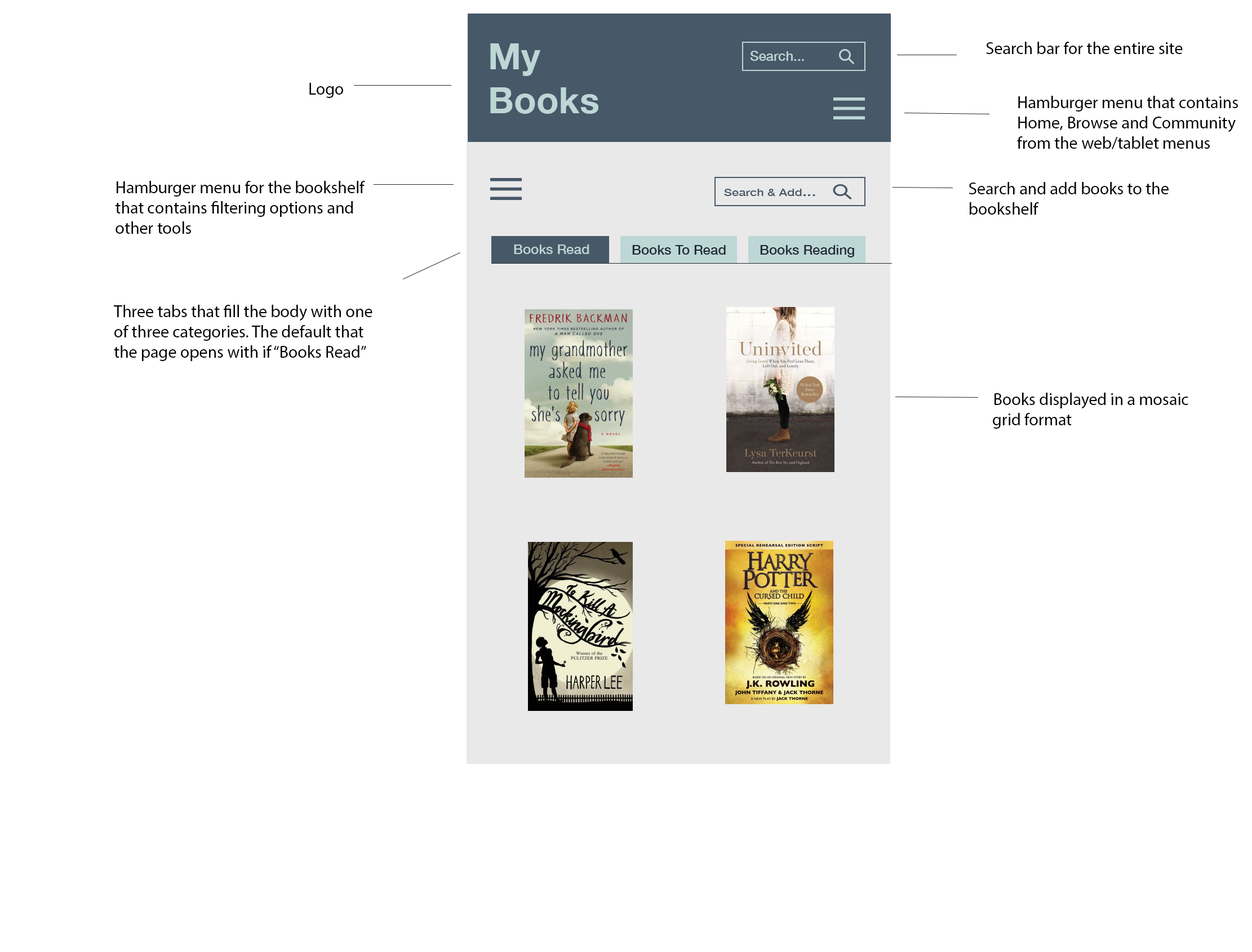
<style>
.page{position:relative;width:1252px;height:952px;background:#ffffff}
.page>*{position:absolute;margin:0}
.t1{font:16.9px "MyriadPro-Regular";color:#000000}
.t2{font:36.6px "HelveticaNeue-Bold";color:#bcd7d6}
.t3{font:13.5px "HelveticaNeue-Medium";color:#bcd7d6}
.t4{font:10.1px "HelveticaNeue-Medium";color:#475868;scale:1.22 1}
.t5{font:13.5px "HelveticaNeue-Medium";color:#475868;scale:1.22 1}
.t6{font:13.5px "HelveticaNeue-Medium";color:#222a31}
</style>
<div class="page">
<p class="t1" style="left:986px;top:42px;width:197px;height:12px">Search bar for the entire site</p>
<p class="t2" style="left:490px;top:43px;width:108px;height:71px">My <br>Books</p>
<p class="t3" style="left:750px;top:51px;width:54px;height:10px">Search...</p>
<p class="t1" style="left:309px;top:83px;width:34px;height:15px">Logo</p>
<p class="t1" style="left:1017px;top:96px;width:221px;height:53px">Hamburger menu that contains<br>Home, Browse and Community<br>from the web/tablet menus</p>
<p class="t1" style="left:116px;top:181px;width:249px;height:53px">Hamburger menu for the bookshelf<br>that contains filtering options and<br>other tools</p>
<p class="t1" style="left:969px;top:182px;width:200px;height:33px">Search and add books to the <br>bookshelf</p>
<p class="t4" style="left:724px;top:189px;width:91px;height:7px">Search &amp; Add<span class="t5">...</span></p>
<p class="t3" style="left:514px;top:245px;width:75px;height:9px">Books Read</p>
<p class="t6" style="left:632px;top:245px;width:94px;height:10px">Books To Read</p>
<p class="t6" style="left:760px;top:245px;width:94px;height:13px">Books Reading</p>
<p class="t1" style="left:114px;top:305px;width:258px;height:56px">Three tabs that fill the body with one<br>of three categories. The default that<br>the page opens with if “Books Read”</p>
<p class="t1" style="left:993px;top:393px;width:195px;height:36px">Books displayed in a mosaic <br>grid format</p>
</div>
